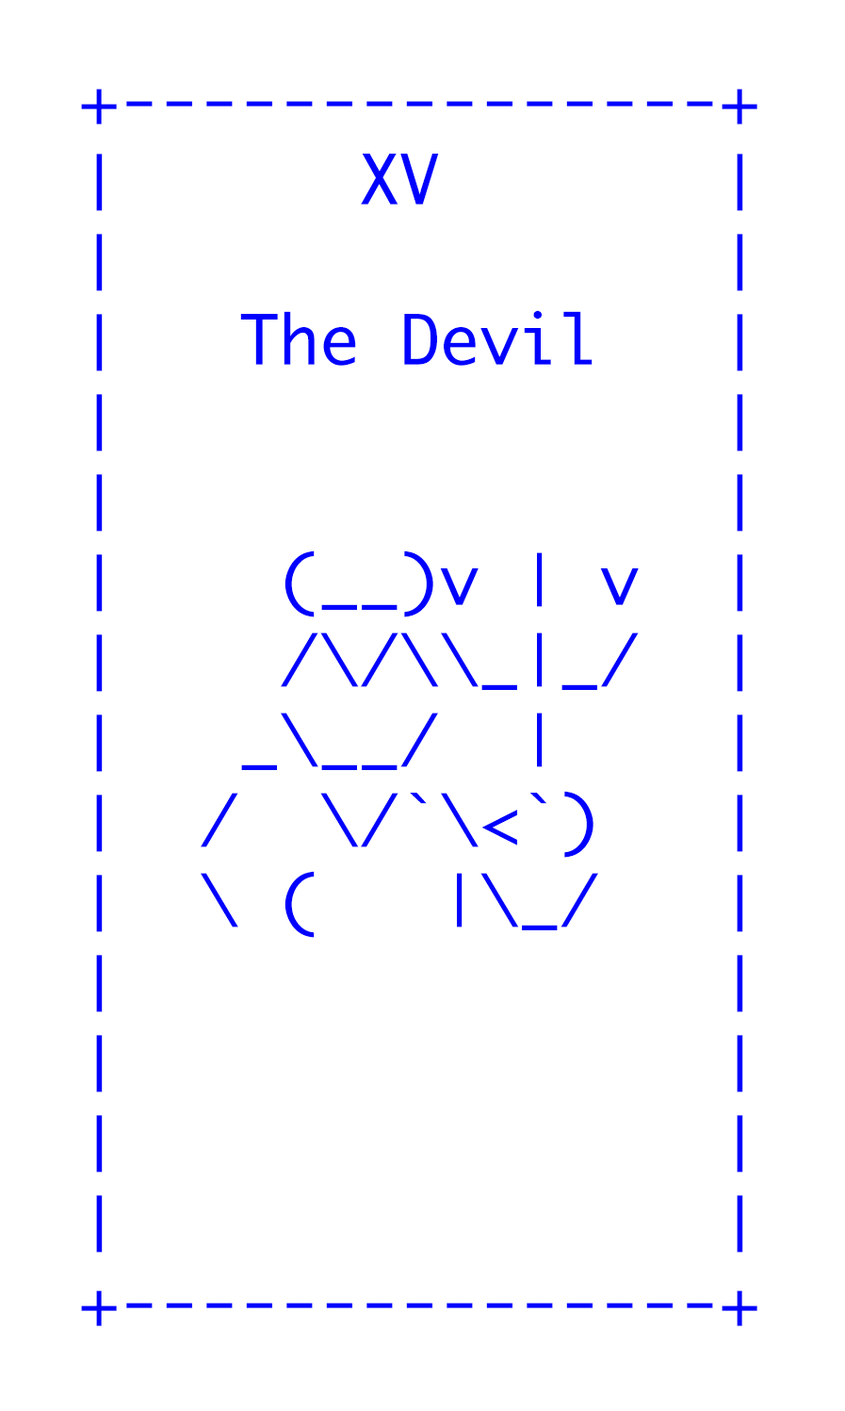
<style>
.page{position:relative;width:845px;height:1411px;background:#ffffff}
.page>*{position:absolute;margin:0}
.t1{font:66.7px "Monaco";color:#0000ff}
</style>
<div class="page">
<p class="t1" style="left:81px;top:89px;width:677px;height:1237px">+---------------+<br>│      XV       │<br>│               │<br>│   The Devil   │<br>│               │<br>│               │<br>│    (__)v | v  │ <br>│    /\/\\_|_/  │ <br>│   _\__/  |    │ <br>│  /  \/`\&lt;`)   │  <br>│  \ (   |\_/   │ <br>│               │<br>│               │<br>│               │<br>│               │<br>+---------------+</p>
</div>
